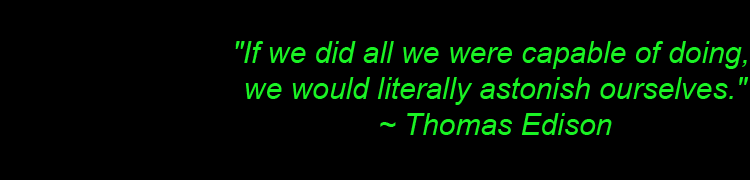
<style>
.page{position:relative;width:750px;height:180px;background:#000000}
.page>*{position:absolute;margin:0}
.t1{font:30px "Arial-ItalicMT";color:#1af324}
</style>
<div class="page">
<p class="t1" style="left:235px;top:41px;width:514px;height:94px;text-align:center">"If we did all we were capable of doing, <br>we would literally astonish ourselves."<br>~ Thomas Edison</p>
</div>
